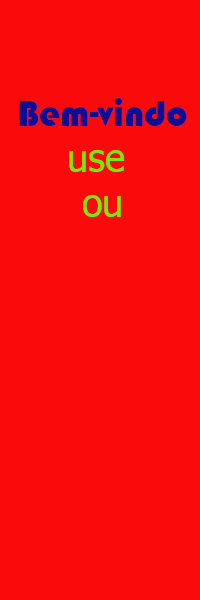
<style>
.page{position:relative;width:200px;height:600px;background:#fa0a0a}
.page>*{position:absolute;margin:0}
.t1{font:38px "Bauhaus93";color:#0e0e95}
.t2{font:38px "Tahoma";color:#6df004}
</style>
<div class="page">
<p class="t1" style="left:19px;top:98px;width:168px;height:119px;text-align:center">Bem-vindo<br><span class="t2">use <br>ou</span></p>
</div>
